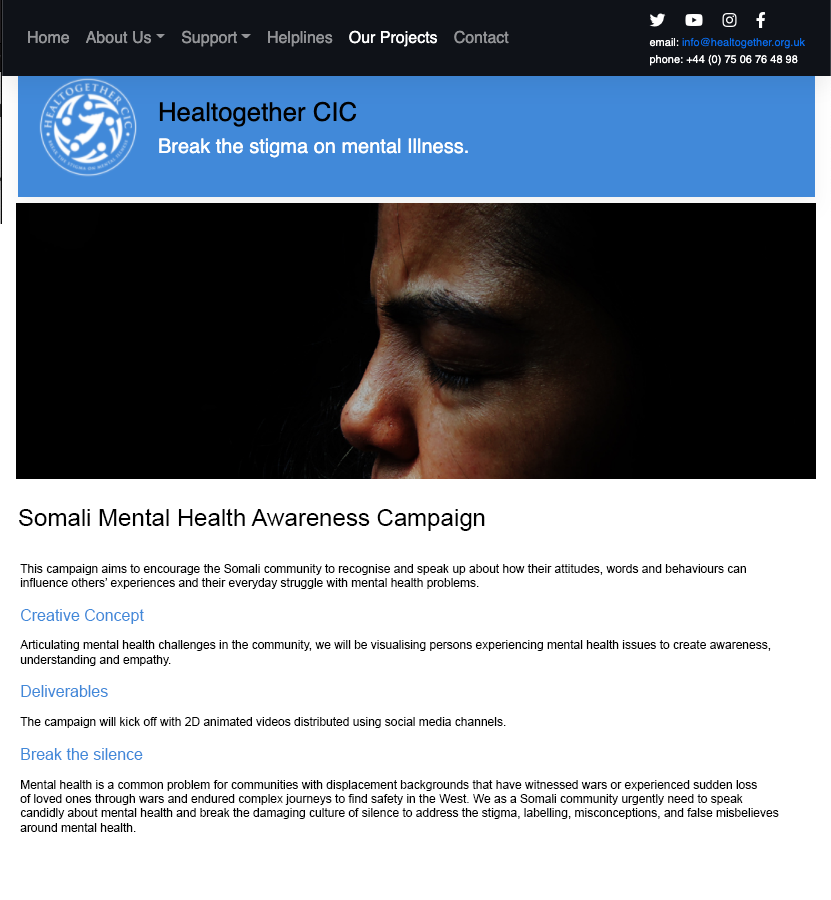
<style>
.page{position:relative;width:831px;height:900px;background:#ffffff}
.page>*{position:absolute;margin:0}
.t1{font:24px "ArialMT";color:#000000}
.t2{font:12px "ArialMT";color:#000000}
.t3{font:16px "ArialMT";color:#4189d9}
</style>
<div class="page">
<p class="t1" style="left:19px;top:508px;width:466px;height:23px">Somali Mental Health Awareness Campaign</p>
<p class="t2" style="left:20px;top:564px;width:759px;height:268px">This campaign aims to encourage the Somali community to recognise and speak up about how their attitudes, words and behaviours can <br>influence others’ experiences and their everyday struggle with mental health problems. <br><br><span class="t3">Creative Concept <br></span><br>Articulating mental health challenges in the community, we will be visualising persons experiencing mental health issues to create awareness, <br>understanding and empathy.  <br><br><span class="t3">Deliverables  <br></span><br>The campaign will kick off with 2D animated videos distributed using social media channels.<br><br><span class="t3">Break the silence <br></span><br>Mental health is a common problem for communities with displacement backgrounds that have witnessed wars or experienced sudden loss <br>of loved ones through wars and endured complex journeys to find safety in the West. We as a Somali community urgently need to speak <br>candidly about mental health and break the damaging culture of silence to address the stigma, labelling, misconceptions, and false misbelieves <br>around mental health.</p>
</div>
